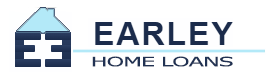
<style>
.page{position:relative;width:273px;height:76px;background:#ffffff}
.page>*{position:absolute;margin:0}
.t1{font:13px "MSReferenceSansSerif";letter-spacing:-0.05em;color:#213253;scale:1.74 1}
</style>
<div class="page">
<p class="t1" style="left:92px;top:56px;width:141px;height:11px">HOME LOANS</p>
</div>
